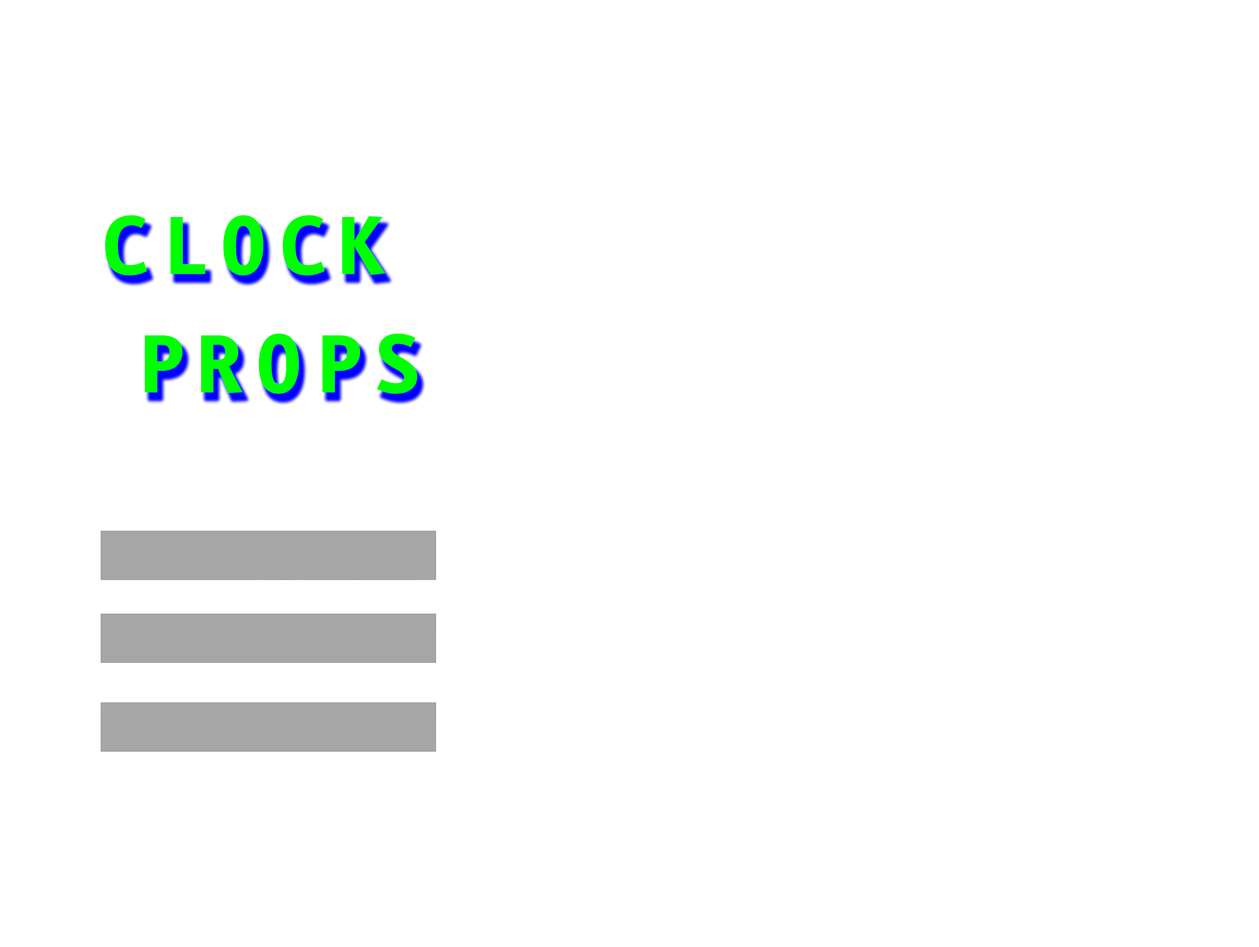
<style>
.page{position:relative;width:1259px;height:947px;background:#ffffff}
.page>*{position:absolute;margin:0}
.t1{font:98.7px "EurekaMono-Bold";color:#00ff00}
</style>
<div class="page">
<p class="t1" style="left:105px;top:215px;width:312px;height:179px;text-align:center">CLOCK <br>    PROPS</p>
</div>
